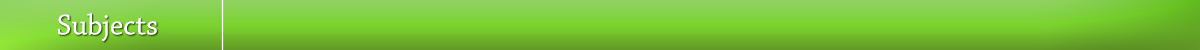
<style>
.page{position:relative;width:1200px;height:50px}
.page>*{position:absolute;margin:0}
.t1{font:30px "ChaparralPro-Regular";color:#ffffff}
</style>
<div class="page">
<p class="t1" style="left:57px;top:13px;width:100px;height:29px">Subjects</p>
</div>
